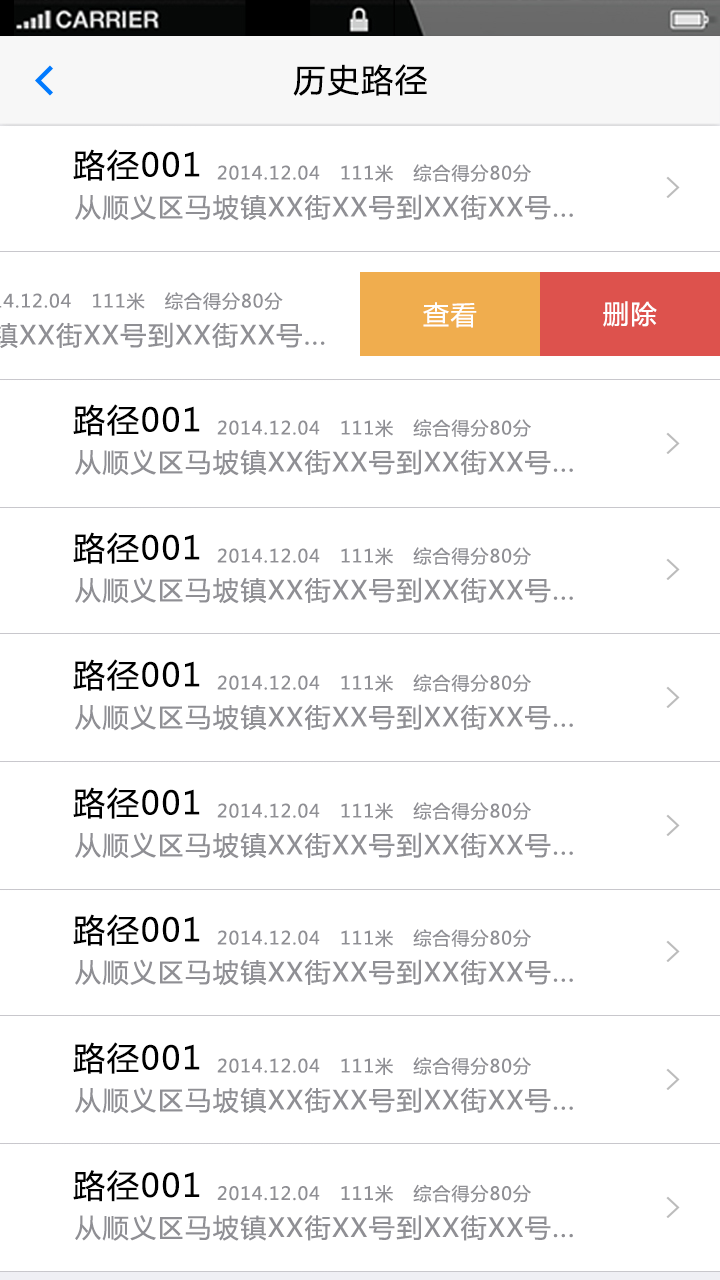
<style>
.page{position:relative;width:720px;height:1280px;background:#ffffff}
.page>*{position:absolute;margin:0}
.t1{font:32px "MicrosoftYaHei";letter-spacing:0.06em;color:#000000}
.t2{font:18px "MicrosoftYaHei";letter-spacing:0.06em;color:#8f8f94}
.t3{font:26px "MicrosoftYaHei";letter-spacing:0.06em;color:#8f8f94}
.t4{font:26px "MicrosoftYaHei";letter-spacing:0.06em;color:#ffffff}
</style>
<div class="page">
<p class="t1" style="left:293px;top:64px;width:134px;height:32px">历史路径</p>
<p class="t1" style="left:73px;top:149px;width:127px;height:32px">路径001</p>
<p class="t2" style="left:217px;top:164px;width:314px;height:18px">2014.12.04   111米   综合得分80分</p>
<p class="t3" style="left:75px;top:194px;width:498px;height:27px">从顺义区马坡镇XX街XX号到XX街XX号...</p>
<p class="t4" style="left:423px;top:302px;width:54px;height:26px">查看</p>
<p class="t4" style="left:603px;top:301px;width:54px;height:26px">删除</p>
<p class="t1" style="left:73px;top:404px;width:127px;height:32px">路径001</p>
<p class="t2" style="left:217px;top:419px;width:314px;height:18px">2014.12.04   111米   综合得分80分</p>
<p class="t3" style="left:75px;top:449px;width:498px;height:27px">从顺义区马坡镇XX街XX号到XX街XX号...</p>
<p class="t1" style="left:73px;top:532px;width:127px;height:32px">路径001</p>
<p class="t2" style="left:217px;top:547px;width:314px;height:18px">2014.12.04   111米   综合得分80分</p>
<p class="t3" style="left:75px;top:577px;width:498px;height:27px">从顺义区马坡镇XX街XX号到XX街XX号...</p>
<p class="t1" style="left:73px;top:659px;width:127px;height:32px">路径001</p>
<p class="t2" style="left:217px;top:674px;width:314px;height:18px">2014.12.04   111米   综合得分80分</p>
<p class="t3" style="left:75px;top:704px;width:498px;height:27px">从顺义区马坡镇XX街XX号到XX街XX号...</p>
<p class="t1" style="left:73px;top:787px;width:127px;height:32px">路径001</p>
<p class="t2" style="left:217px;top:802px;width:314px;height:18px">2014.12.04   111米   综合得分80分</p>
<p class="t3" style="left:75px;top:832px;width:498px;height:27px">从顺义区马坡镇XX街XX号到XX街XX号...</p>
<p class="t1" style="left:73px;top:914px;width:127px;height:32px">路径001</p>
<p class="t2" style="left:217px;top:929px;width:314px;height:18px">2014.12.04   111米   综合得分80分</p>
<p class="t3" style="left:75px;top:959px;width:498px;height:27px">从顺义区马坡镇XX街XX号到XX街XX号...</p>
<p class="t1" style="left:73px;top:1042px;width:127px;height:32px">路径001</p>
<p class="t2" style="left:217px;top:1057px;width:314px;height:18px">2014.12.04   111米   综合得分80分</p>
<p class="t3" style="left:75px;top:1087px;width:498px;height:27px">从顺义区马坡镇XX街XX号到XX街XX号...</p>
<p class="t1" style="left:73px;top:1170px;width:127px;height:32px">路径001</p>
<p class="t2" style="left:217px;top:1184px;width:314px;height:19px">2014.12.04   111米   综合得分80分</p>
<p class="t3" style="left:75px;top:1215px;width:498px;height:26px">从顺义区马坡镇XX街XX号到XX街XX号...</p>
</div>
